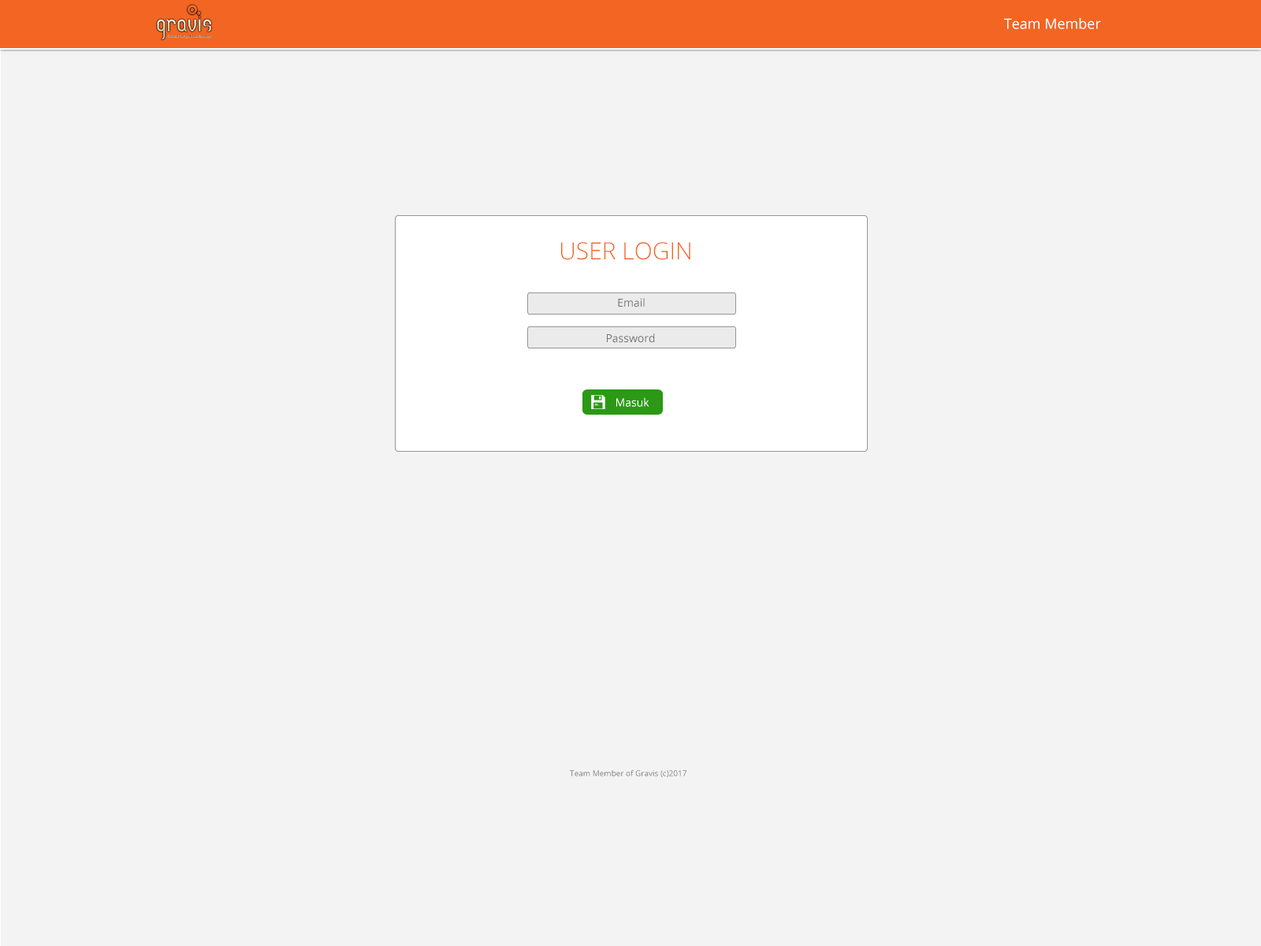
<style>
.page{position:relative;width:1261px;height:946px;background:#f3f3f3}
.page>*{position:absolute;margin:0}
.t1{font:14.2px "OpenSans";color:#ffffff}
.t2{font:23.6px "OpenSans-Light";color:#f26522}
.t3{font:11px "OpenSans";color:#717171}
.t4{font:11px "OpenSans";color:#ffffff}
.t5{font:7.9px "OpenSans";color:#7c7c7c}
</style>
<div class="page">
<p class="t1" style="left:1004px;top:17px;width:97px;height:12px">Team Member</p>
<p class="t2" style="left:561px;top:242px;width:129px;height:18px">USER LOGIN</p>
<p class="t3" style="left:618px;top:298px;width:27px;height:9px">Email</p>
<p class="t3" style="left:607px;top:333px;width:48px;height:10px">Password</p>
<p class="t4" style="left:616px;top:397px;width:33px;height:10px">Masuk</p>
<p class="t5" style="left:570px;top:770px;width:116px;height:7px">Team Member of Gravis (c)2017</p>
</div>
